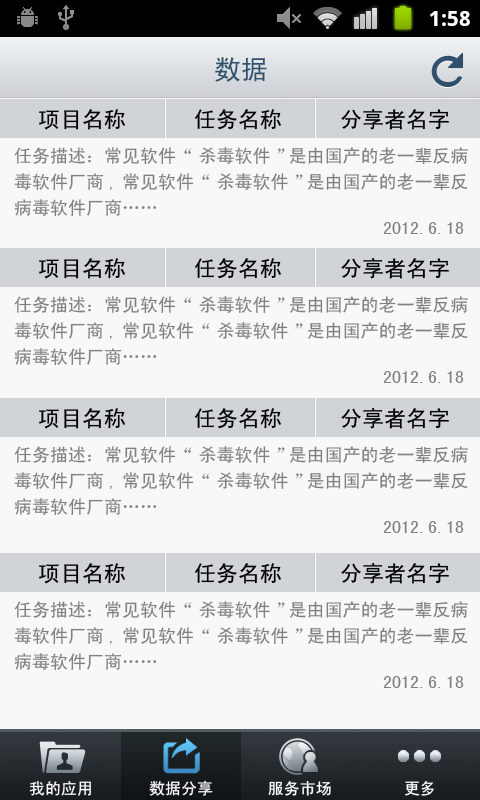
<style>
.page{position:relative;width:480px;height:800px;background:#f8f8f8}
.page>*{position:absolute;margin:0}
.t1{font:27px "SimHei";color:#30506c}
.t2{font:22px "SimHei";color:#000000}
.t3{font:22px "SimHei";color:#010000}
.t4{font:18px/26px "SimHei";color:#808080}
.t5{font:18px "SimHei";color:#808080}
.t6{font:16px "SimHei";color:#ffffff}
</style>
<div class="page">
<p class="t1" style="left:215px;top:57px;width:52px;height:25px">数据</p>
<p class="t2" style="left:39px;top:109px;width:86px;height:21px">项目名称</p>
<p class="t3" style="left:194px;top:109px;width:87px;height:21px">任务名称</p>
<p class="t2" style="left:341px;top:109px;width:108px;height:21px">分享者名字</p>
<p class="t4" style="left:14px;top:147px;width:454px;height:70px">任务描述：常见软件 “杀毒软件”是由国产的老一辈反病<br>毒软件厂商,常见软件 “杀毒软件”是由国产的老一辈反<br>病毒软件厂商……</p>
<p class="t5" style="left:383px;top:222px;width:81px;height:12px">2012.6.18</p>
<p class="t2" style="left:39px;top:258px;width:86px;height:21px">项目名称</p>
<p class="t3" style="left:194px;top:258px;width:87px;height:21px">任务名称</p>
<p class="t2" style="left:341px;top:258px;width:108px;height:21px">分享者名字</p>
<p class="t4" style="left:14px;top:296px;width:454px;height:70px">任务描述：常见软件 “杀毒软件”是由国产的老一辈反病<br>毒软件厂商,常见软件 “杀毒软件”是由国产的老一辈反<br>病毒软件厂商……</p>
<p class="t5" style="left:383px;top:371px;width:81px;height:12px">2012.6.18</p>
<p class="t2" style="left:39px;top:408px;width:86px;height:21px">项目名称</p>
<p class="t3" style="left:194px;top:408px;width:87px;height:21px">任务名称</p>
<p class="t2" style="left:341px;top:408px;width:108px;height:21px">分享者名字</p>
<p class="t4" style="left:14px;top:446px;width:454px;height:70px">任务描述：常见软件 “杀毒软件”是由国产的老一辈反病<br>毒软件厂商,常见软件 “杀毒软件”是由国产的老一辈反<br>病毒软件厂商……</p>
<p class="t5" style="left:383px;top:521px;width:81px;height:12px">2012.6.18</p>
<p class="t2" style="left:39px;top:563px;width:86px;height:21px">项目名称</p>
<p class="t3" style="left:194px;top:563px;width:87px;height:21px">任务名称</p>
<p class="t2" style="left:341px;top:563px;width:108px;height:21px">分享者名字</p>
<p class="t4" style="left:14px;top:601px;width:454px;height:70px">任务描述：常见软件 “杀毒软件”是由国产的老一辈反病<br>毒软件厂商,常见软件 “杀毒软件”是由国产的老一辈反<br>病毒软件厂商……</p>
<p class="t5" style="left:383px;top:676px;width:81px;height:12px">2012.6.18</p>
<p class="t6" style="left:29px;top:781px;width:62px;height:15px">我的应用</p>
<p class="t6" style="left:149px;top:780px;width:64px;height:16px">数据分享</p>
<p class="t6" style="left:268px;top:780px;width:63px;height:16px">服务市场</p>
<p class="t6" style="left:405px;top:780px;width:29px;height:16px">更多</p>
</div>
